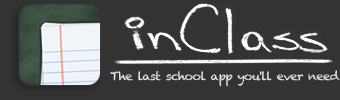
<style>
.page{position:relative;width:340px;height:100px;background:#333333}
.page>*{position:absolute;margin:0}
.t1{font:11.2px "Chalkduster";letter-spacing:-0.05em;color:#e5e5e5;scale:1.06 1}
</style>
<div class="page">
<p class="t1" style="left:110px;top:70px;width:230px;height:17px">The last school app you'll ever need</p>
</div>
